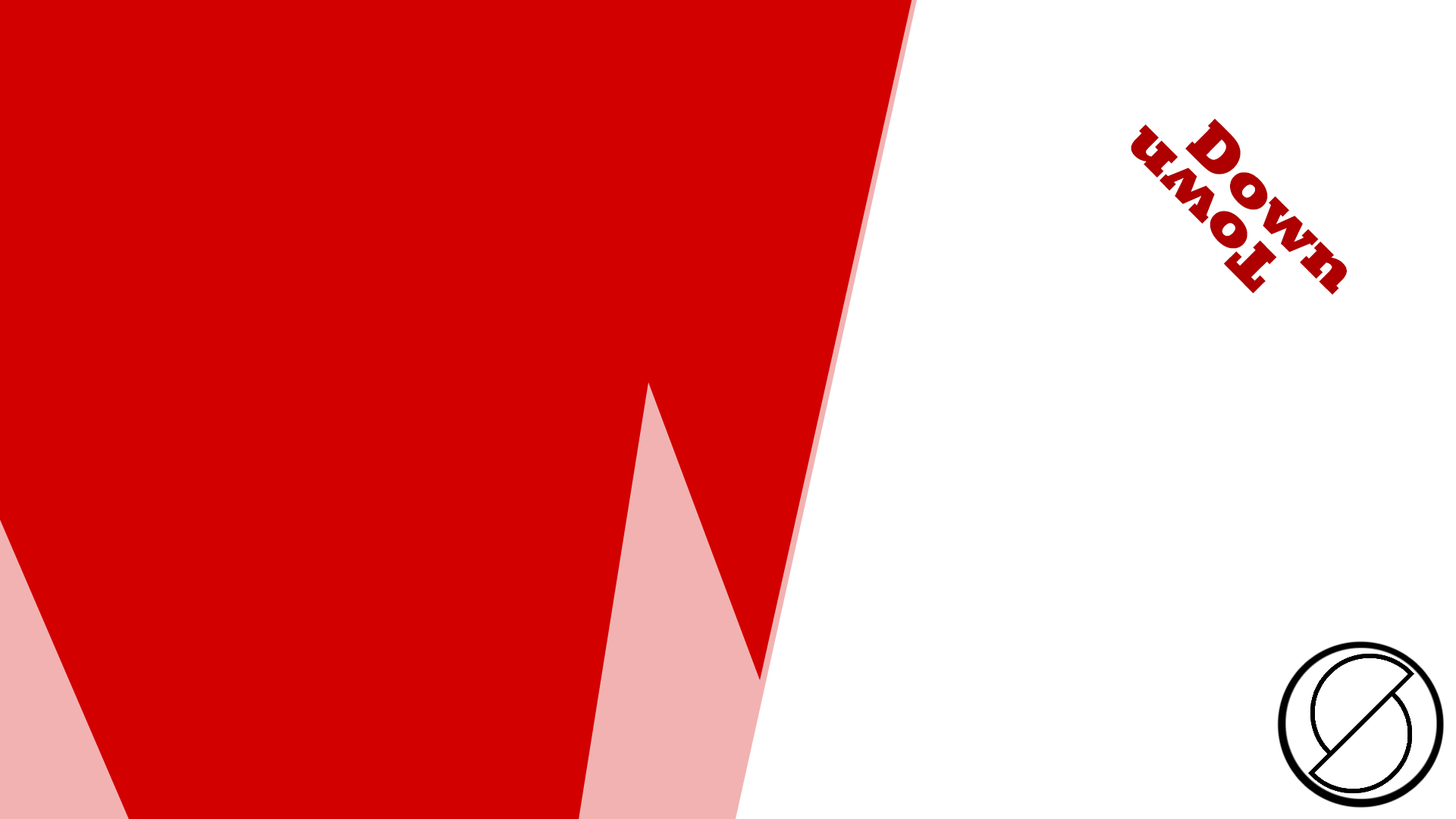
<style>
.page{position:relative;width:1456px;height:819px;background:#d30000}
.page>*{position:absolute;margin:0}
.t1{font:62.2px "Rockwell-ExtraBold";color:#ae0000}
</style>
<div class="page">
<p class="t1" style="left:1131px;top:124px;width:146px;height:169px;rotate:-135deg">Town</p>
<p class="t1" style="left:1185px;top:118px;width:162px;height:177px;rotate:45deg">Down</p>
</div>
